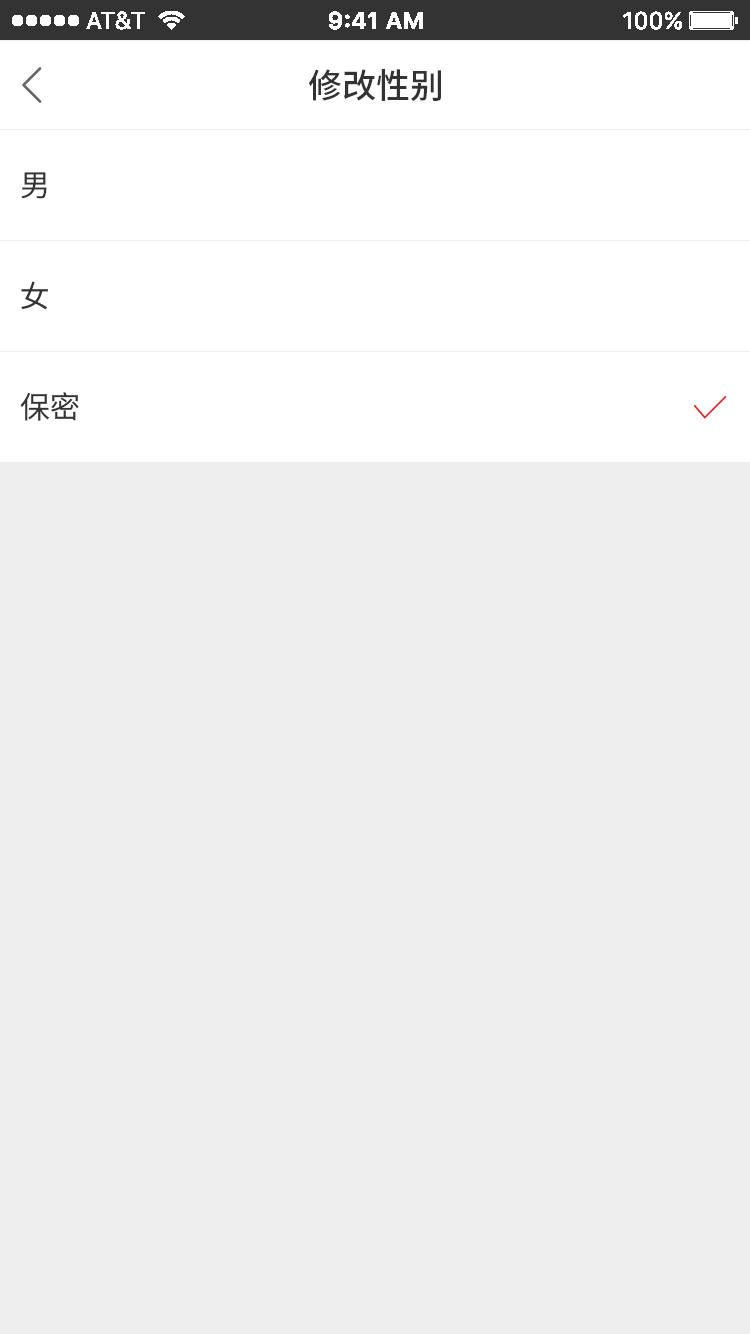
<style>
.page{position:relative;width:750px;height:1334px;background:#eeeeee}
.page>*{position:absolute;margin:0}
.t1{font:34px "SourceHanSansCN-Medium";color:#333333}
.t2{font:30px "SourceHanSansCN-Regular";color:#333333}
</style>
<div class="page">
<p class="t1" style="left:308px;top:69px;width:133px;height:33px">修改性别</p>
<p class="t2" style="left:21px;top:172px;width:26px;height:27px">男</p>
<p class="t2" style="left:21px;top:281px;width:27px;height:29px">女</p>
<p class="t2" style="left:20px;top:392px;width:59px;height:29px">保密</p>
</div>
